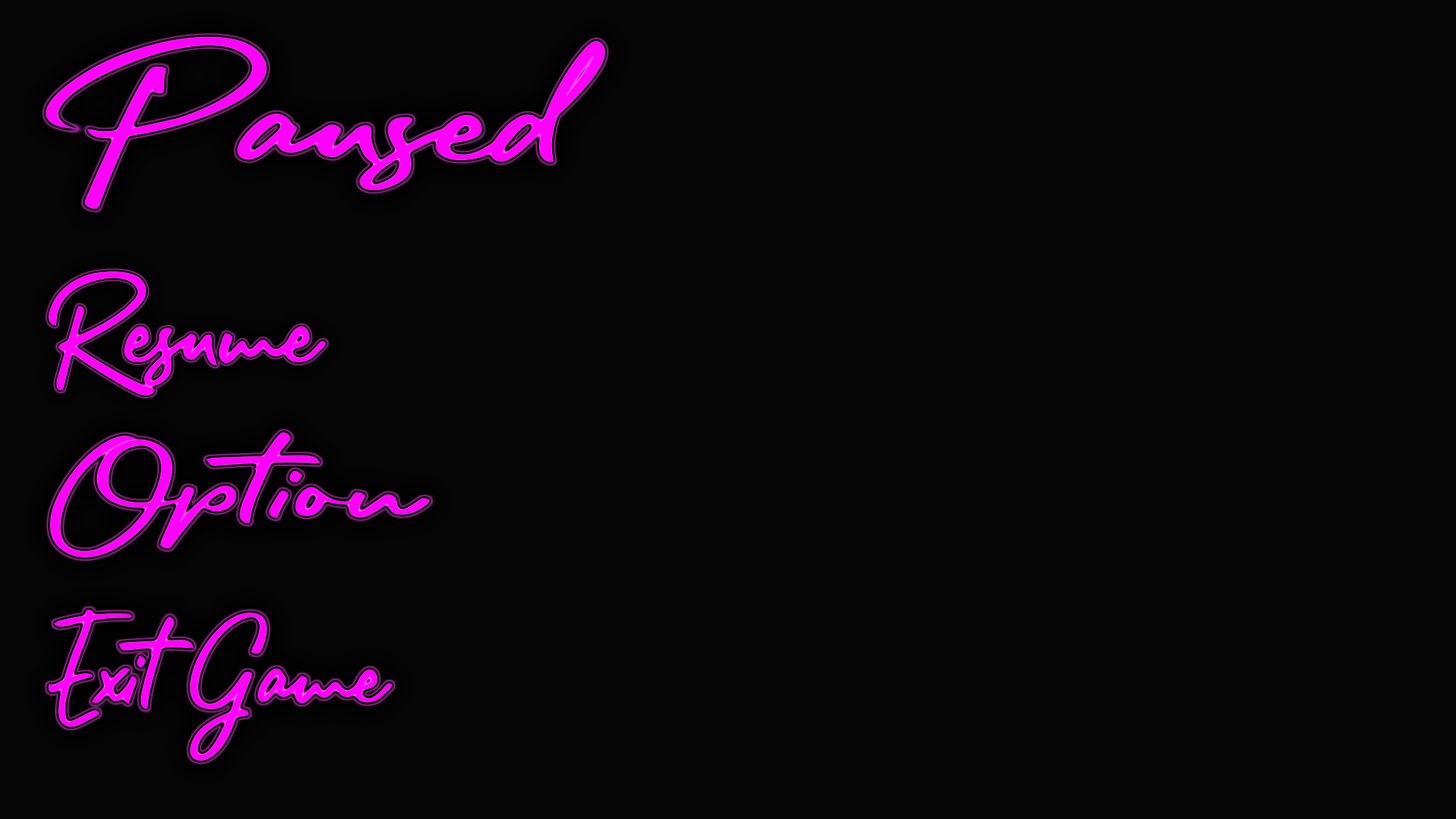
<style>
.page{position:relative;width:1456px;height:819px;background:#050505}
.page>*{position:absolute;margin:0}
.t1{font:103.1px "RafttelScriptDEMORegular";color:#ff00fc;scale:1.34 1}
.t2{font:81.7px "RafttelScriptDEMORegular";color:#ff00fc;scale:0.87 1}
.t3{font:74.4px "RafttelScriptDEMORegular";color:#ff00fc;scale:1.35 1}
.t4{font:75.6px "RafttelScriptDEMORegular";color:#ff00fc;scale:0.87 1}
</style>
<div class="page">
<p class="t1" style="left:46px;top:37px;width:559px;height:172px">Paused</p>
<p class="t2" style="left:49px;top:271px;width:277px;height:124px">Resume</p>
<p class="t3" style="left:50px;top:432px;width:380px;height:125px">Options</p>
<p class="t4" style="left:49px;top:610px;width:344px;height:151px">Exit Game</p>
</div>
